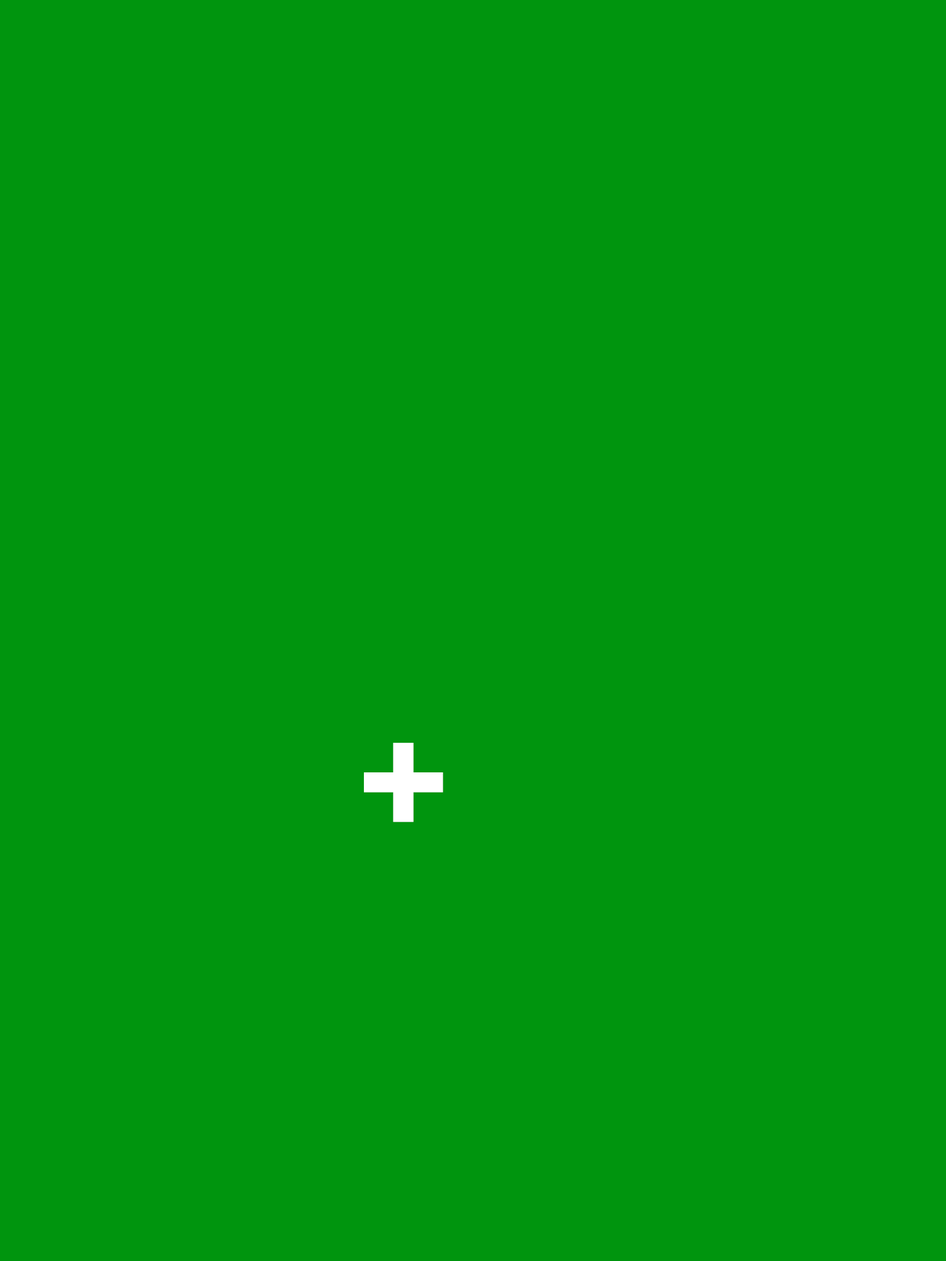
<style>
.page{position:relative;width:946px;height:1261px;background:#00950e}
.page>*{position:absolute;margin:0}
.t1{font:157.6px "ArialRoundedMTBold";color:#ffffff}
.t2{font:113.5px "ArialRoundedMTBold";color:#ffffff}
</style>
<div class="page">
<p class="t1" style="left:364px;top:743px;width:79px;height:79px;rotate:90deg"><span class="t2">  </span>+</p>
</div>
